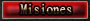
<style>
.page{position:relative;width:90px;height:21px}
.page>*{position:absolute;margin:0}
.t1{font:13px "Ming-Lt-HKSCS-ExtB";color:#e4c89b}
</style>
<div class="page">
<p class="t1" style="left:20px;top:4px;width:52px;height:10px">Misiones</p>
</div>
